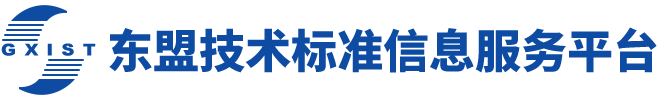
<style>
.page{position:relative;width:659px;height:100px;background:#ffffff}
.page>*{position:absolute;margin:0}
.t1{font:46px "SourceHanSansCN-Heavy";color:#0e4ca4}
.t2{font:16.2px "Arial-Black";letter-spacing:0.06em;color:#0e4ca4;scale:1.11 1}
</style>
<div class="page">
<p class="t1" style="left:109px;top:27px;width:548px;height:46px">东盟技术标准信息服务平台</p>
<p class="t2" style="left:1px;top:43px;width:95px;height:13px">G X I S T</p>
</div>
